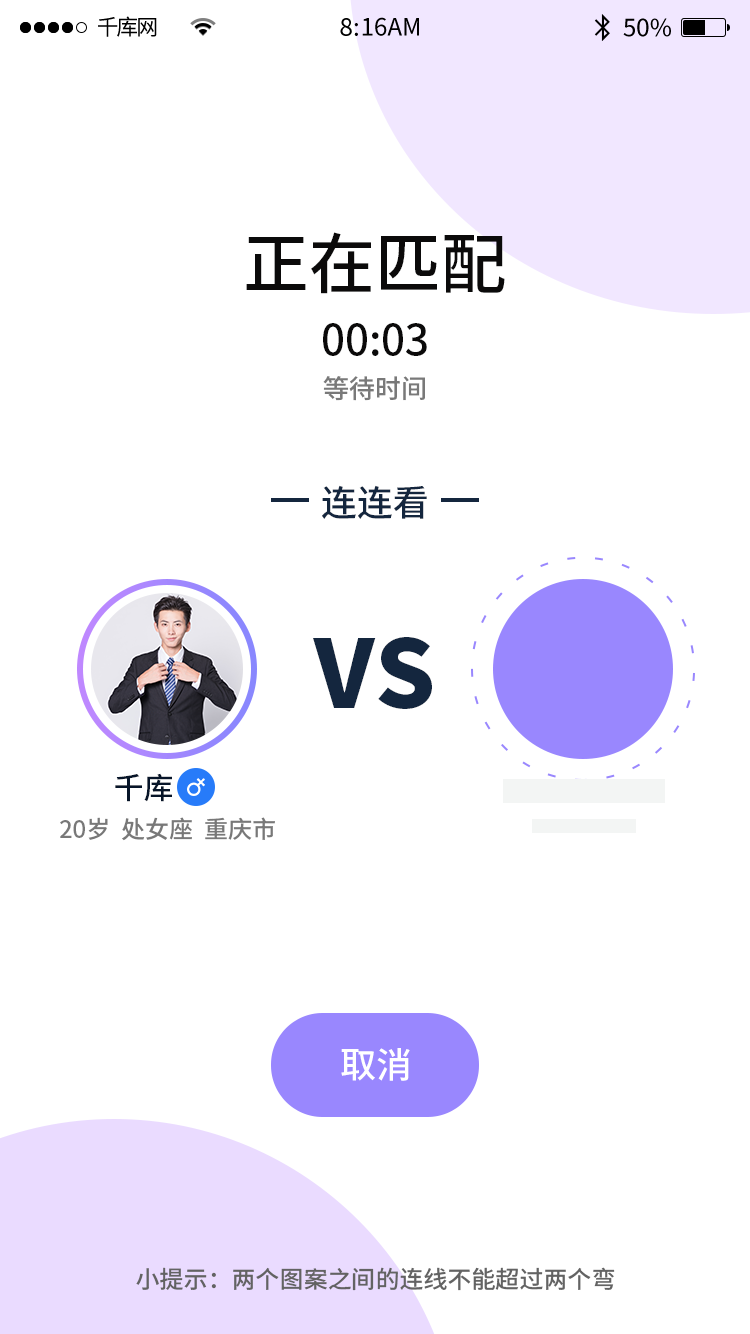
<style>
.page{position:relative;width:750px;height:1334px;background:#ffffff}
.page>*{position:absolute;margin:0}
.t1{font:66px "SourceHanSansCN-Medium";color:#0b0a0a}
.t2{font:42px "SourceHanSansCN-Medium";color:#0b0a0a}
.t3{font:26px "SourceHanSansCN-Medium";color:#797979}
.t4{font:36px "SourceHanSansCN-Medium";color:#14263e}
.t5{font:94.3px "SourceHanSansCN-Heavy";color:#14263e}
.t6{font:30px "SourceHanSansCN-Medium";color:#071529}
.t7{font:24px "SourceHanSansCN-Medium";color:#787878}
.t8{font:36px "SourceHanSansCN-Medium";color:#ffffff}
.t9{font:24px "SourceHanSansCN-Medium";color:#636363}
</style>
<div class="page">
<p class="t1" style="left:246px;top:232px;width:259px;height:62px">正在匹配</p>
<p class="t2" style="left:323px;top:323px;width:104px;height:33px">00:03</p>
<p class="t3" style="left:323px;top:376px;width:102px;height:25px">等待时间</p>
<p class="t4" style="left:322px;top:485px;width:105px;height:34px">连连看</p>
<p class="t5" style="left:313px;top:637px;width:119px;height:72px">VS</p>
<p class="t6" style="left:115px;top:773px;width:57px;height:29px">千库</p>
<p class="t7" style="left:60px;top:817px;width:215px;height:24px">20岁  处女座  重庆市</p>
<p class="t8" style="left:341px;top:1048px;width:69px;height:33px">取消</p>
<p class="t9" style="left:136px;top:1267px;width:479px;height:24px">小提示：两个图案之间的连线不能超过两个弯</p>
</div>
